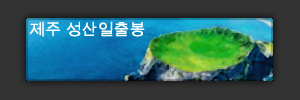
<style>
.page{position:relative;width:300px;height:100px;background:#333333}
.page>*{position:absolute;margin:0}
.t1{font:16px "ArialUnicodeMS";color:#fffefe}
</style>
<div class="page">
<p class="t1" style="left:29px;top:21px;width:116px;height:16px">제주 성산일출봉</p>
</div>
